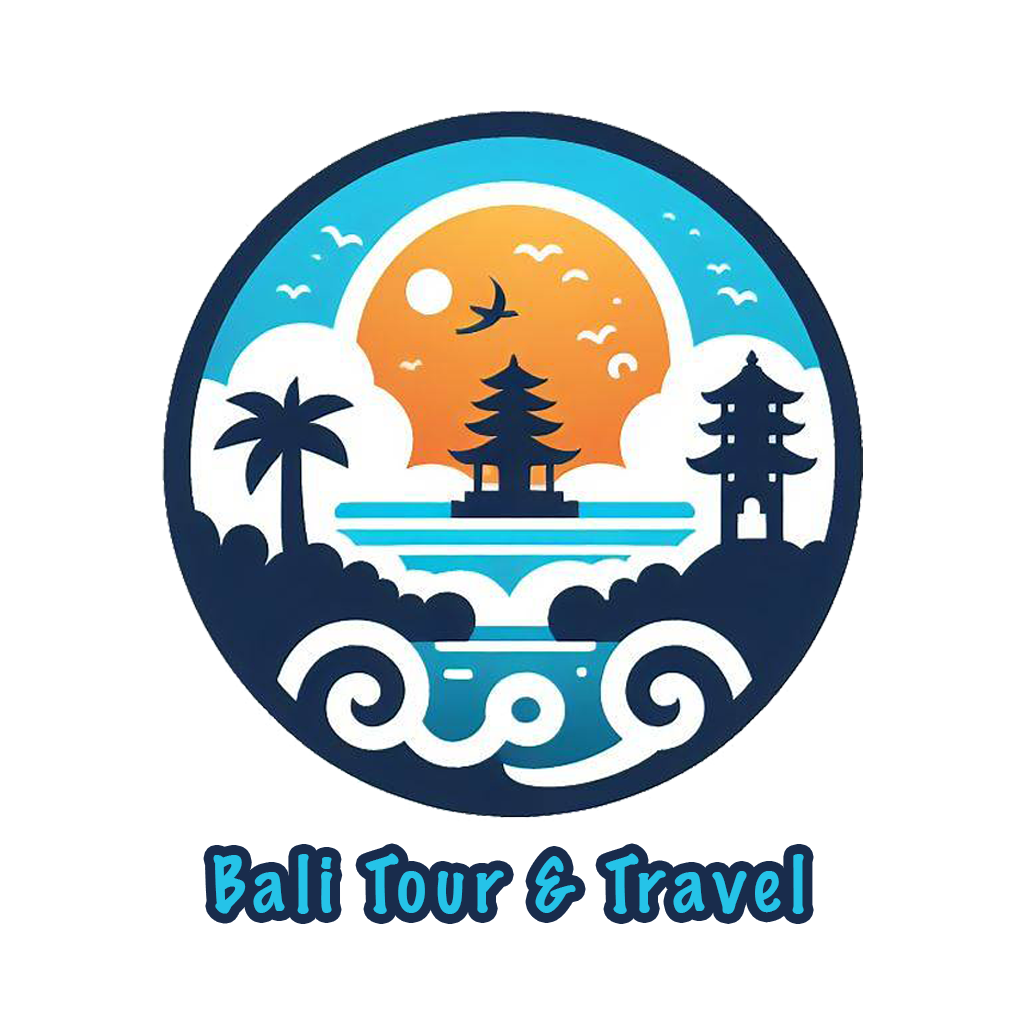
<style>
.page{position:relative;width:1024px;height:1024px;background:#ffffff}
.page>*{position:absolute;margin:0}
.t1{font:70.3px "MarkerFelt-Thin";letter-spacing:0.1em;color:#25c3e8}
</style>
<div class="page">
<p class="t1" style="left:213px;top:853px;width:591px;height:61px">Bali Tour &amp; Travel</p>
</div>
